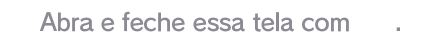
<style>
.page{position:relative;width:440px;height:44px;background:#ffffff}
.page>*{position:absolute;margin:0}
.t1{font:24px "RodinPro-DB";letter-spacing:-0.025em;color:#8c8b93}
</style>
<div class="page">
<p class="t1" style="left:40px;top:11px;width:309px;height:21px">Abra e feche essa tela com</p>
<p class="t1" style="left:396px;top:27px;width:4px;height:4px">.</p>
</div>
